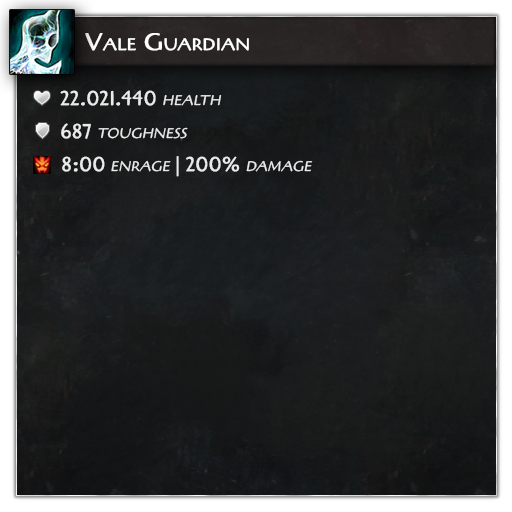
<style>
.page{position:relative;width:512px;height:512px}
.page>*{position:absolute;margin:0}
.t1{font:24px "Cagliostro-Regular";color:#ffffff;font-variant:small-caps;font-weight:bold}
.t2{font:20px "Cagliostro-Regular";color:#eaeaea;font-weight:bold}
.t3{font:20px "Cagliostro-Regular";color:#eaeaea;font-variant:small-caps;font-style:italic}
.t4{font:20px "Cagliostro-Regular";color:#eaeaea;font-variant:small-caps}
.t5{font:20px "Cagliostro-Regular";color:#eaeaea;font-variant:small-caps;font-weight:bold}
</style>
<div class="page">
<p class="t1" style="left:85px;top:33px;width:164px;height:18px">Vale Guardian</p>
<p class="t2" style="left:60px;top:90px;width:162px;height:16px">22.021.440 <span class="t3">health</span></p>
<p class="t3" style="left:61px;top:123px;width:127px;height:16px"><span class="t2">687</span> toughness</p>
<p class="t3" style="left:62px;top:156px;width:251px;height:21px"><span class="t2">8:00</span> enrage <span class="t4">| </span><span class="t5">200%</span> damage</p>
</div>
